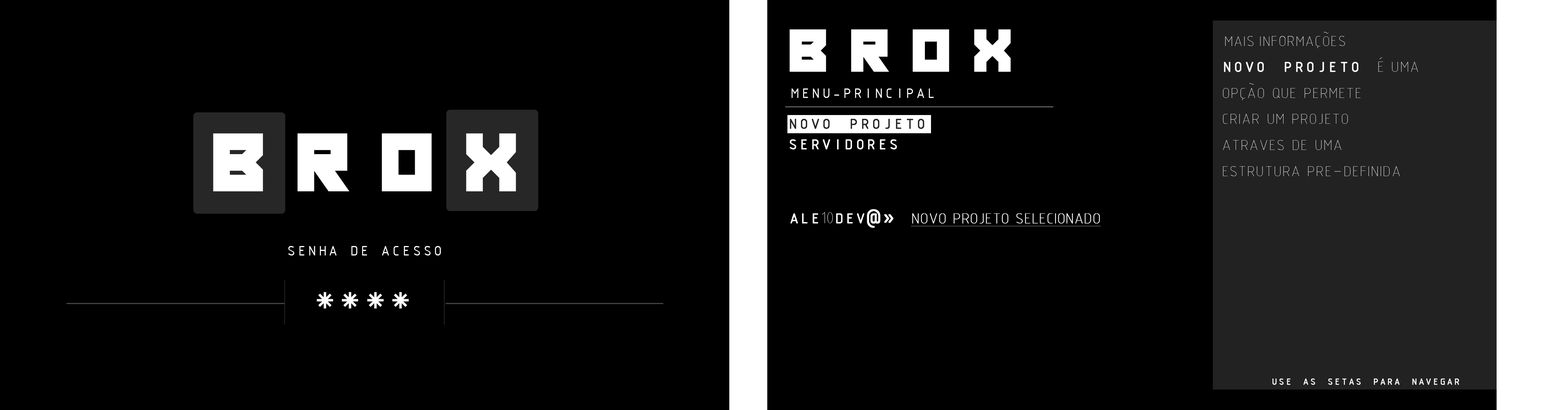
<style>
.page{position:relative;width:1568px;height:410px;background:#000000}
.page>*{position:absolute;margin:0}
.t1{font:61.9px "Beyond2025";letter-spacing:0.36em;color:#ffffff;font-variant:small-caps}
.t2{font:14.8px "ISOCP3";color:#ffffff;font-variant:small-caps}
.t3{font:21.7px "ISOCP3";color:#ffffff;font-variant:small-caps}
.t4{font:21.7px "ISOCTEUR";color:#ffffff;font-variant:small-caps;font-weight:bold}
.t5{font:14.8px "ISOCTEUR";color:#ffffff;font-variant:small-caps}
.t6{font:21.7px "ISOCTEUR";color:#222222;font-variant:small-caps;font-weight:bold}
.t7{font:84.8px "Beyond2025";letter-spacing:0.36em;color:#ffffff;font-variant:small-caps}
.t8{font:21.7px "ISOCP3";letter-spacing:-0.04em;color:#ffffff;font-variant:small-caps;font-weight:bold;text-decoration:underline}
.t9{font:21.7px "ISOCTEUR";letter-spacing:-0.04em;color:#ffffff;font-variant:small-caps;font-weight:bold}
.t10{font:17.2px "ISOCP3";letter-spacing:-0.04em;color:#ffffff;font-variant:small-caps}
.t11{font:47.6px "Beyond2025";letter-spacing:0.14em;color:#ffffff;font-variant:small-caps}
.t12{font:13.8px "ISOCTEUR";color:#ffffff;font-variant:small-caps;font-weight:bold}
</style>
<div class="page">
<p class="t1" style="left:789px;top:29px;width:222px;height:43px">BROX</p>
<p class="t2" style="left:1225px;top:32px;width:120px;height:16px">MAIS INFORMAÇÕES</p>
<p class="t3" style="left:1223px;top:57px;width:195px;height:119px"><span class="t4">novo projeto </span>é uma <br>opção que permete <br>criar um projeto <br>atraves de uma <br>estrutura pre-definida</p>
<p class="t5" style="left:792px;top:89px;width:142px;height:9px">MENU-PRINCIPAL</p>
<p class="t6" style="left:790px;top:119px;width:134px;height:10px">novo projeto</p>
<p class="t7" style="left:213px;top:133px;width:303px;height:58px">BROX</p>
<p class="t4" style="left:790px;top:139px;width:107px;height:11px">servidores</p>
<p class="t8" style="left:790px;top:209px;width:311px;height:19px"><span class="t9">ale</span><span class="t10">10</span><span class="t9">dev@» </span>novo projeto selecionado</p>
<p class="t5" style="left:288px;top:246px;width:153px;height:10px">SENHA DE ACESSO</p>
<p class="t11" style="left:317px;top:292px;width:92px;height:17px">****</p>
<p class="t12" style="left:1272px;top:379px;width:187px;height:6px">use as setas para navegar</p>
</div>
